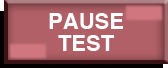
<style>
.page{position:relative;width:168px;height:68px;background:#b16067}
.page>*{position:absolute;margin:0}
.t1{font:22px/22px "Helvetica-Bold";color:#ffffff}
</style>
<div class="page">
<p class="t1" style="left:49px;top:13px;width:74px;height:38px;text-align:center">PAUSE<br>TEST</p>
<p class="t1" style="left:49px;top:13px;width:74px;height:38px;text-align:center">PAUSE<br>TEST</p>
</div>
